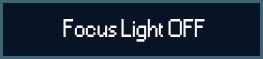
<style>
.page{position:relative;width:263px;height:59px;background:#081426}
.page>*{position:absolute;margin:0}
.t1{font:24px "Small Fonts";color:#ffffff}
</style>
<div class="page">
<p class="t1" style="left:63px;top:19px;width:142px;height:23px">Focus Light OFF</p>
</div>
